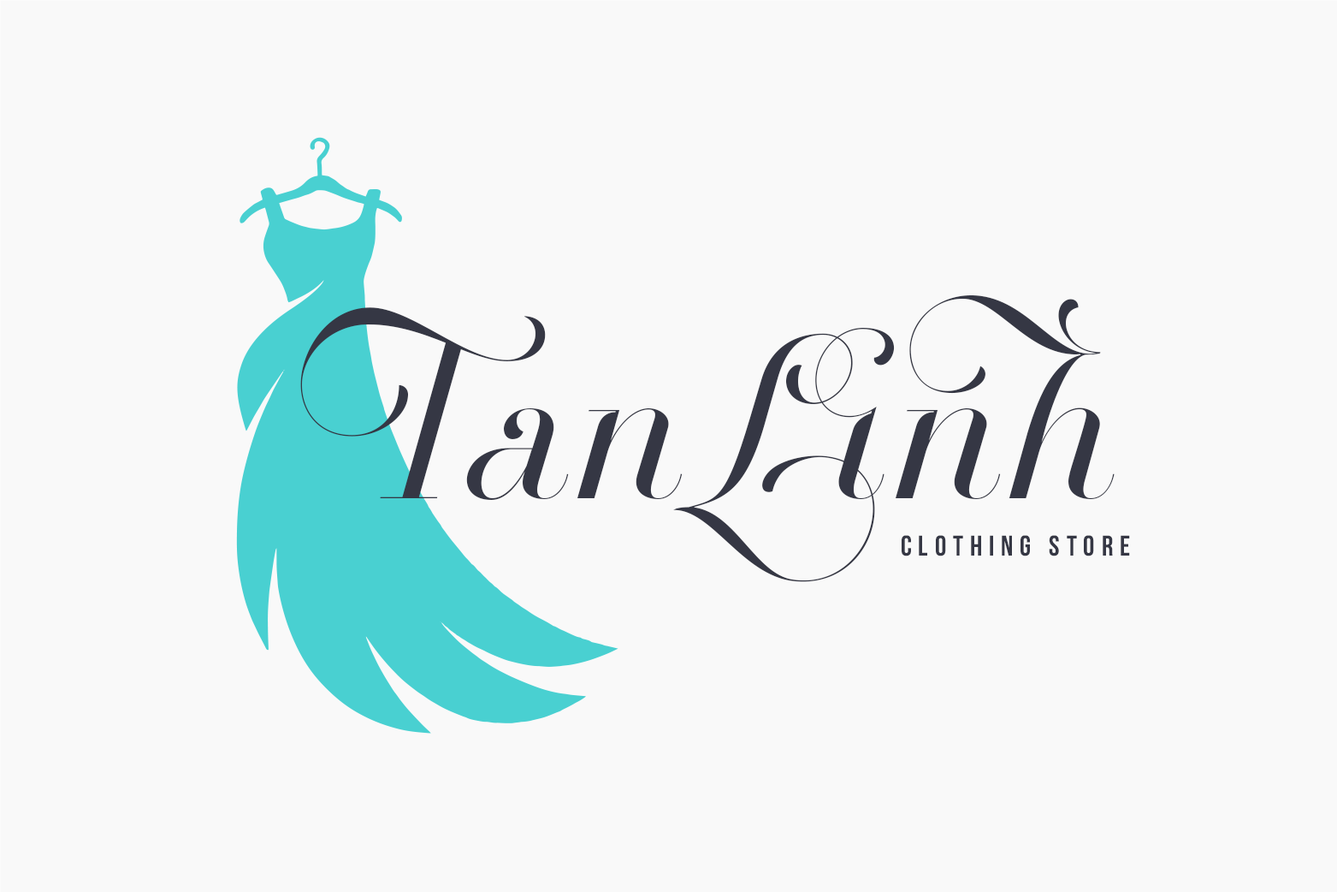
<style>
.page{position:relative;width:1337px;height:892px;background:#f9f9f9}
.page>*{position:absolute;margin:0}
.t1{font:281.7px "BreathePro";letter-spacing:-0.003em;color:#363744}
.t2{font:28.5px "UTM-Bebas";letter-spacing:0.237em;color:#363744}
</style>
<div class="page">
<p class="t1" style="left:300px;top:295px;width:815px;height:287px">TanLinh</p>
<p class="t2" style="left:902px;top:535px;width:228px;height:21px">CLOTHING STORE</p>
</div>
